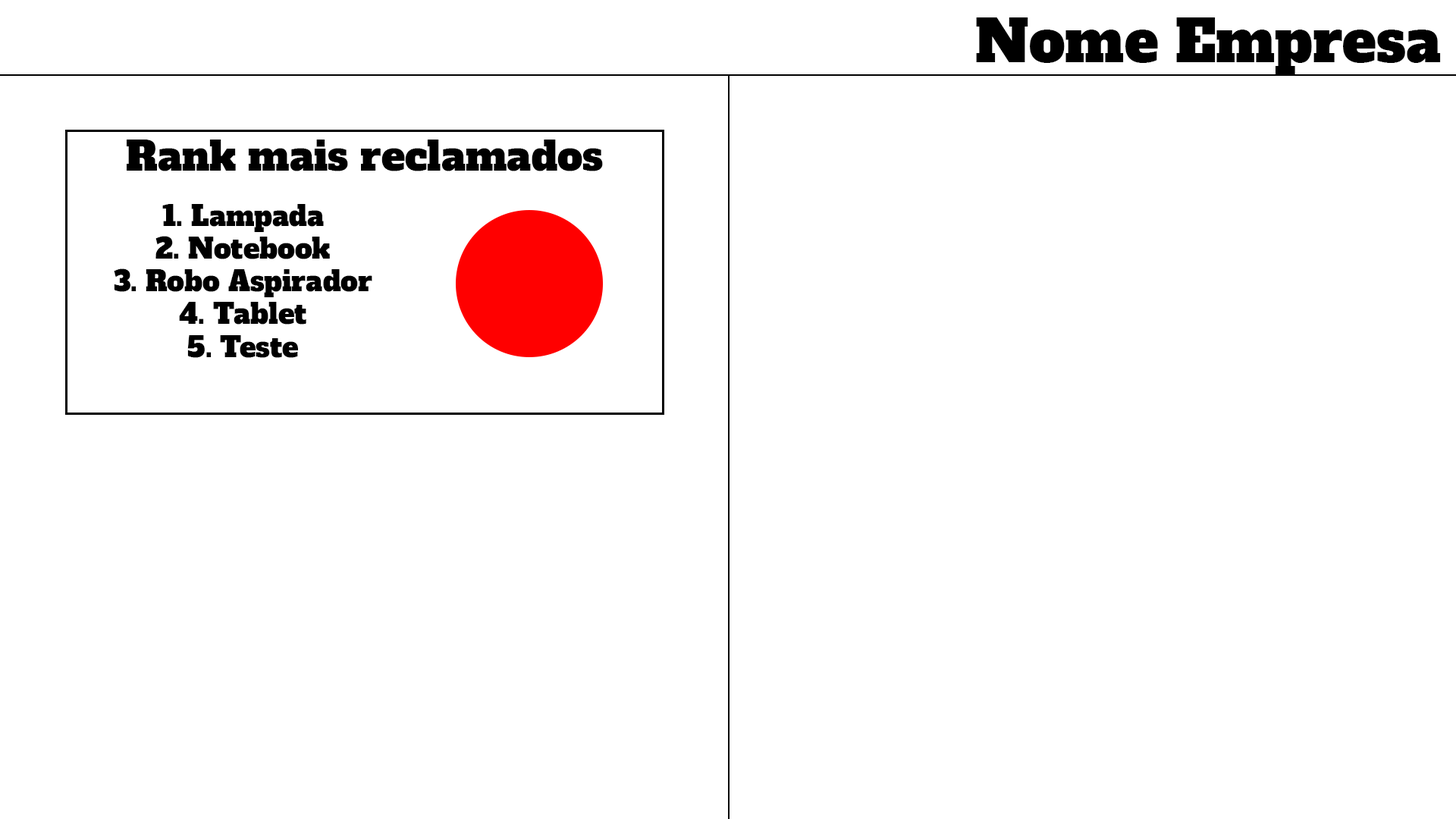
<style>
.page{position:relative;width:1456px;height:819px;background:#ffffff}
.page>*{position:absolute;margin:0}
.t1{font:56.9px "AlfaSlabOne-Regular";color:#000000}
.t2{font:39.7px "AlfaSlabOne-Regular";color:#000000}
.t3{font:27.3px "AlfaSlabOne-Regular";color:#000000}
</style>
<div class="page">
<p class="t1" style="left:976px;top:17px;width:465px;height:58px">Nome Empresa</p>
<p class="t2" style="left:127px;top:140px;width:476px;height:31px">Rank mais reclamados</p>
<p class="t3" style="left:114px;top:204px;width:258px;height:154px;text-align:center">1. Lampada<br>2. Notebook<br>3. Robo Aspirador<br>4. Tablet<br>5. Teste</p>
</div>
